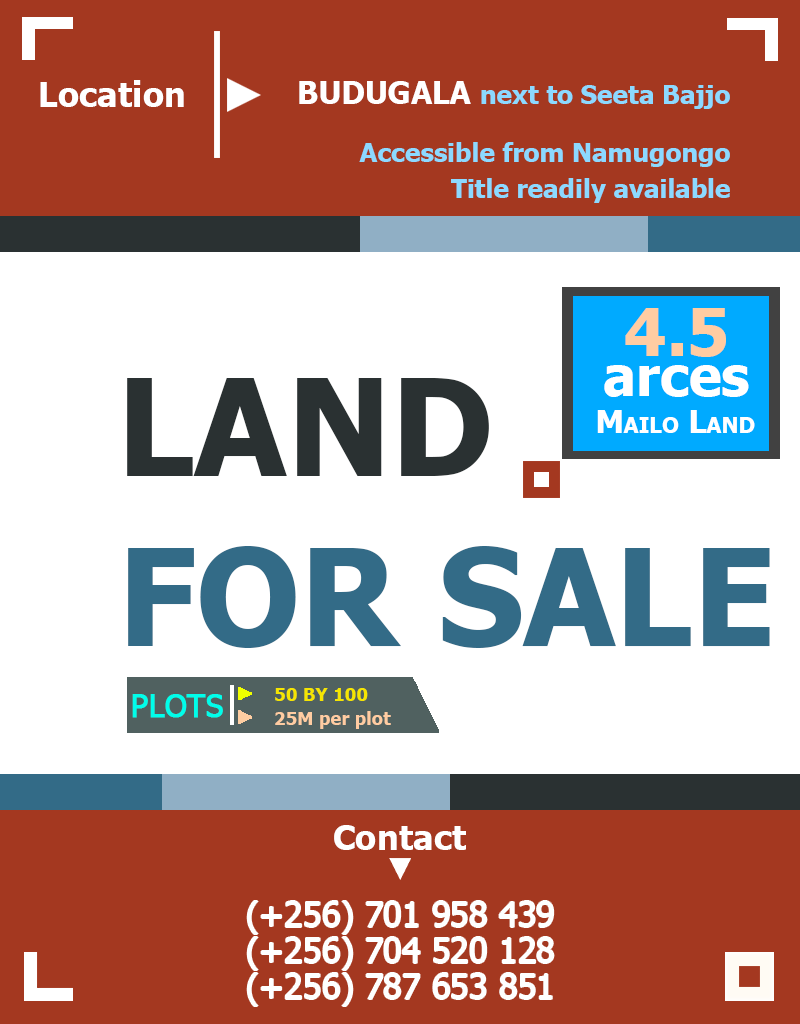
<style>
.page{position:relative;width:800px;height:1024px;background:#ffffff}
.page>*{position:absolute;margin:0}
.t1{font:34.4px "Tahoma-Bold";color:#ffffff}
.t2{font:26px "Tahoma-Bold";color:#8cd9ff}
.t3{font:31px "Tahoma-Bold";color:#ffffff}
.t4{font:26px/36px "Tahoma-Bold";color:#8cd9ff}
.t5{font:66.2px "Tahoma-Bold";color:#ffcca2}
.t6{font:55.1px "Tahoma-Bold";color:#ffffff}
.t7{font:135px "Tahoma-Bold";color:#2a3132}
.t8{font:31.6px "Tahoma-Bold";color:#ffffff;font-variant:small-caps}
.t9{font:135px "Tahoma-Bold";color:#336b87}
.t10{font:18.2px "Tahoma-Bold";color:#f5e501}
.t11{font:30.9px "Tahoma";color:#00feea;font-weight:bold}
.t12{font:18.2px "Tahoma-Bold";color:#ffcca2}
.t13{font:34.4px/36px "Tahoma";color:#ffffff}
</style>
<div class="page">
<p class="t1" style="left:40px;top:80px;width:144px;height:27px">Location</p>
<p class="t2" style="left:299px;top:81px;width:431px;height:28px"><span class="t3">BUDUGALA </span>next to Seeta Bajjo</p>
<p class="t4" style="left:359px;top:142px;width:371px;height:61px;text-align:right">Accessible from Namugongo<br>Title readily available</p>
<p class="t5" style="left:625px;top:308px;width:101px;height:49px">4.5</p>
<p class="t6" style="left:604px;top:365px;width:145px;height:32px">arces</p>
<p class="t7" style="left:127px;top:378px;width:362px;height:98px">LAND</p>
<p class="t8" style="left:597px;top:410px;width:158px;height:23px">Mailo Land</p>
<p class="t9" style="left:128px;top:546px;width:642px;height:102px">FOR SALE</p>
<p class="t10" style="left:275px;top:688px;width:93px;height:13px">50 BY 100</p>
<p class="t11" style="left:132px;top:694px;width:91px;height:24px">PLOTS</p>
<p class="t12" style="left:275px;top:711px;width:116px;height:18px">25M per plot</p>
<p class="t1" style="left:334px;top:825px;width:132px;height:25px">Contact</p>
<p class="t13" style="left:247px;top:901px;width:307px;height:105px;text-align:center">(+256) 701 958 439<br>(+256) 704 520 128<br>(+256) 787 653 851</p>
</div>
